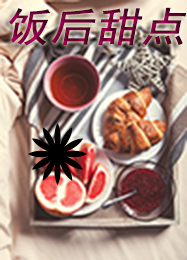
<style>
.page{position:relative;width:187px;height:260px}
.page>*{position:absolute;margin:0}
.t1{font:40.6px "SimHei";font-weight:bold;font-style:italic;scale:1.09 1}
</style>
<div class="page">
<p class="t1" style="left:9px;top:7px;width:178px;height:39px">饭后甜点</p>
</div>
